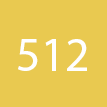
<style>
.page{position:relative;width:107px;height:107px;background:#e9c950}
.page>*{position:absolute;margin:0}
.t1{font:48px "MyriadPro-Regular";color:#ffffff}
</style>
<div class="page">
<p class="t1" style="left:18px;top:39px;width:69px;height:32px">512</p>
</div>
